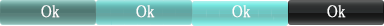
<style>
.page{position:relative;width:384px;height:26px}
.page>*{position:absolute;margin:0}
.t1{font:17.1px "MS-PMincho";color:#ffffff;font-weight:bold;scale:0.84 1}
</style>
<div class="page">
<p class="t1" style="left:41px;top:5px;width:19px;height:13px">Ok</p>
<p class="t1" style="left:136px;top:5px;width:19px;height:13px">Ok</p>
<p class="t1" style="left:232px;top:5px;width:19px;height:13px">Ok</p>
<p class="t1" style="left:327px;top:5px;width:19px;height:13px">Ok</p>
</div>
